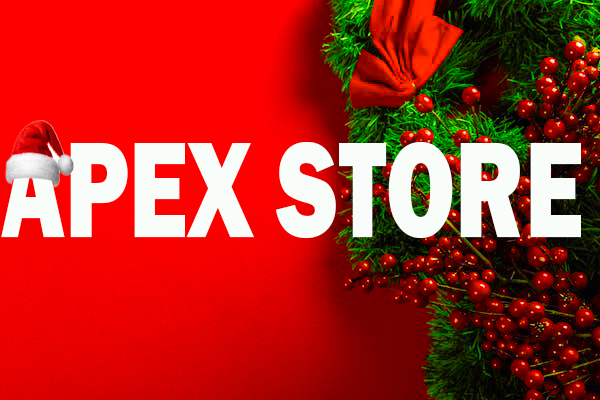
<style>
.page{position:relative;width:600px;height:400px}
.page>*{position:absolute;margin:0}
.t1{font:141.3px "FranklinGothic-Heavy";color:#f9fdf9;scale:0.71 1}
</style>
<div class="page">
<p class="t1" style="left:1px;top:142px;width:580px;height:96px">APEX STORE</p>
</div>
